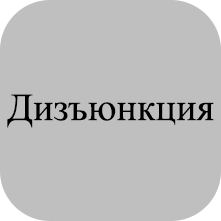
<style>
.page{position:relative;width:221px;height:221px;background:#bfbfbf}
.page>*{position:absolute;margin:0}
.t1{font:38.3px "TimesNewRomanPSMT";color:#000000}
</style>
<div class="page">
<p class="t1" style="left:7px;top:94px;width:207px;height:34px">Дизъюнкция</p>
</div>
